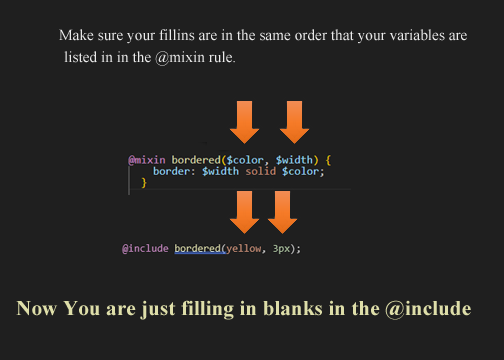
<style>
.page{position:relative;width:504px;height:360px;background:#1f1f1f}
.page>*{position:absolute;margin:0}
.t1{font:15.3px "TimesNewRomanPSMT";color:#ebebeb}
.t2{font:21.3px "TimesNewRomanPS-BoldMT";color:#dedea9}
</style>
<div class="page">
<p class="t1" style="left:59px;top:29px;width:408px;height:15px">Make sure your fillins are in the same order that your variables are</p>
<p class="t1" style="left:64px;top:51px;width:171px;height:15px">listed in in the @mixin rule.</p>
<p class="t2" style="left:16px;top:300px;width:455px;height:20px">Now You are just filling in blanks in the @include</p>
</div>
